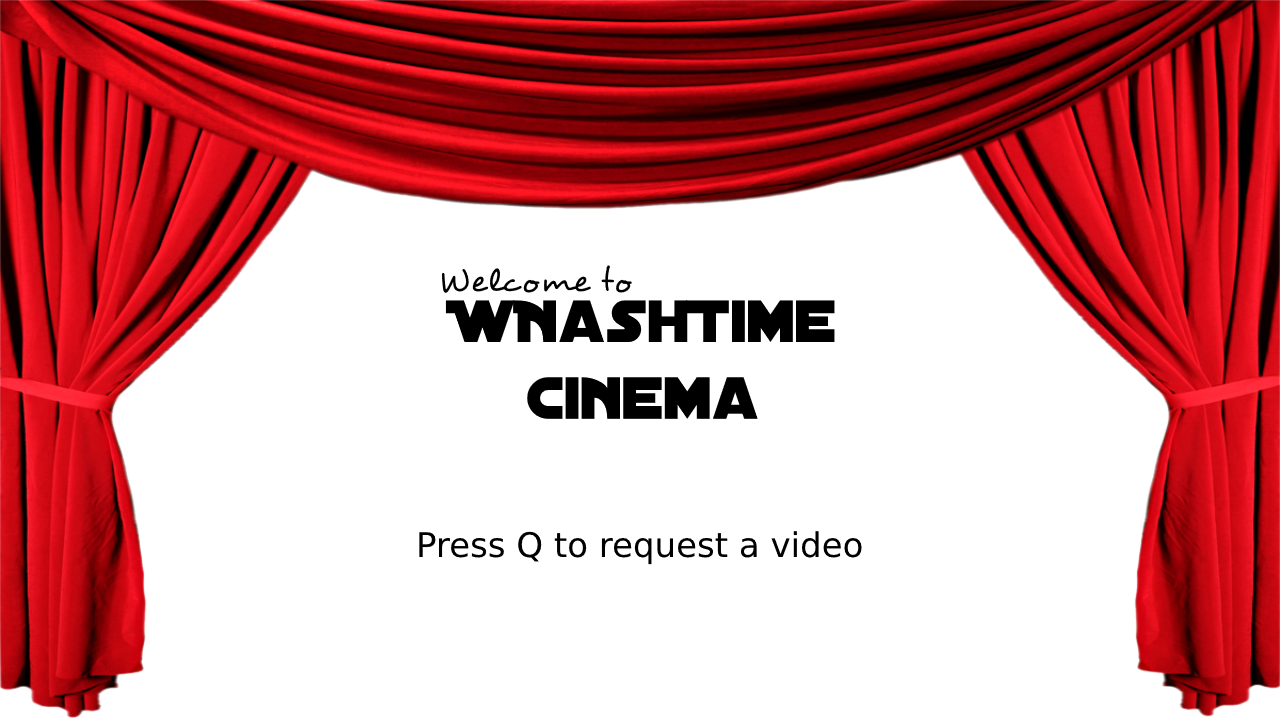
<style>
.page{position:relative;width:1280px;height:718px;background:#ffffff}
.page>*{position:absolute;margin:0}
.t1{font:34px "Desyrel";color:#000000}
.t2{font:64px "DistantGalaxy";color:#000000}
.t3{font:34px "DejaVuSans";color:#000000}
</style>
<div class="page">
<p class="t1" style="left:441px;top:265px;width:191px;height:28px">Welcome to</p>
<p class="t2" style="left:445px;top:300px;width:390px;height:119px;text-align:center">WNashTime<br>Cinema</p>
<p class="t3" style="left:419px;top:531px;width:443px;height:34px">Press Q to request a video</p>
</div>
